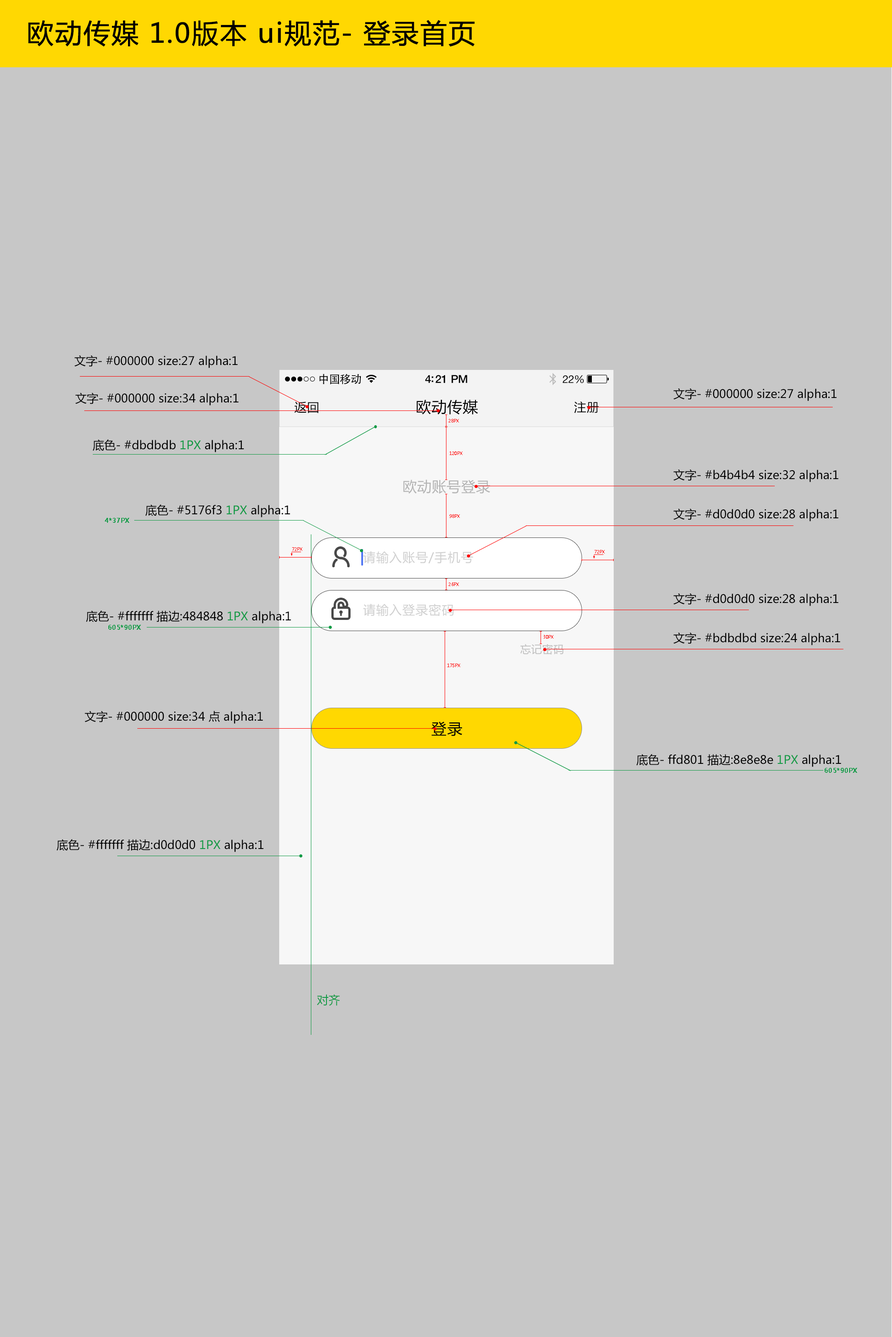
<style>
.page{position:relative;width:892px;height:1337px;background:#c7c7c7}
.page>*{position:absolute;margin:0}
.t1{font:26.7px "MicrosoftYaHei";letter-spacing:0.03em;color:#000000;font-weight:bold}
.t2{font:11.6px "MicrosoftYaHei";color:#000000}
.t3{font:4.4px "MicrosoftYaHei";color:#fe0000;scale:0.96 1}
.t4{font:11.6px "MicrosoftYaHei";color:#119a45}
.t5{font:6.7px "MicrosoftYaHei";color:#119a45;font-weight:bold;scale:0.96 1}
</style>
<div class="page">
<p class="t1" style="left:28px;top:20px;width:446px;height:27px">欧动传媒 1.0版本 ui规范- 登录首页</p>
<p class="t2" style="left:74px;top:355px;width:164px;height:13px">文字- #000000 size:27 alpha:1</p>
<p class="t2" style="left:673px;top:388px;width:163px;height:13px">文字- #000000 size:27 alpha:1</p>
<p class="t2" style="left:75px;top:393px;width:164px;height:13px">文字- #000000 size:34 alpha:1</p>
<p class="t3" style="left:448px;top:419px;width:11px;height:4px">28PX</p>
<p class="t2" style="left:93px;top:440px;width:151px;height:12px">底色- #dbdbdb <span class="t4">1PX</span> alpha:1</p>
<p class="t3" style="left:449px;top:452px;width:13px;height:3px">120PX</p>
<p class="t2" style="left:673px;top:469px;width:165px;height:13px">文字- #b4b4b4 size:32 alpha:1</p>
<p class="t2" style="left:145px;top:505px;width:145px;height:13px">底色- #5176f3 <span class="t4">1PX</span> alpha:1</p>
<p class="t2" style="left:673px;top:509px;width:165px;height:13px">文字- #d0d0d0 size:28 alpha:1</p>
<p class="t5" style="left:105px;top:518px;width:24px;height:5px">4*37PX</p>
<p class="t3" style="left:449px;top:514px;width:11px;height:4px">98PX</p>
<p class="t3" style="left:292px;top:547px;width:10px;height:4px">72PX</p>
<p class="t3" style="left:594px;top:550px;width:11px;height:4px">72PX</p>
<p class="t3" style="left:448px;top:583px;width:11px;height:3px">26PX</p>
<p class="t2" style="left:673px;top:593px;width:165px;height:13px">文字- #d0d0d0 size:28 alpha:1</p>
<p class="t2" style="left:86px;top:611px;width:205px;height:13px">底色- #fffffff 描边:484848 <span class="t4">1PX</span> alpha:1</p>
<p class="t5" style="left:108px;top:625px;width:33px;height:5px">605*90PX</p>
<p class="t3" style="left:543px;top:635px;width:10px;height:4px">30PX</p>
<p class="t2" style="left:673px;top:633px;width:167px;height:13px">文字- #bdbdbd size:24 alpha:1</p>
<p class="t3" style="left:447px;top:664px;width:13px;height:3px">175PX</p>
<p class="t2" style="left:85px;top:711px;width:178px;height:13px">文字- #000000 size:34 点 alpha:1</p>
<p class="t2" style="left:636px;top:754px;width:205px;height:13px">底色- ffd801 描边:8e8e8e <span class="t4">1PX</span> alpha:1</p>
<p class="t5" style="left:824px;top:768px;width:33px;height:5px">605*90PX</p>
<p class="t2" style="left:57px;top:839px;width:206px;height:13px">底色- #fffffff 描边:d0d0d0 <span class="t4">1PX</span> alpha:1</p>
<p class="t4" style="left:317px;top:995px;width:23px;height:11px">对齐</p>
</div>
